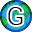
<style>
.page{position:relative;width:32px;height:32px;background:#ffffff}
.page>*{position:absolute;margin:0}
.t1{font:6.8px "Roboto-Medium"}
</style>
<div class="page">
<p class="t1" style="left:7px;top:6px;width:17px;height:20px">G</p>
</div>
